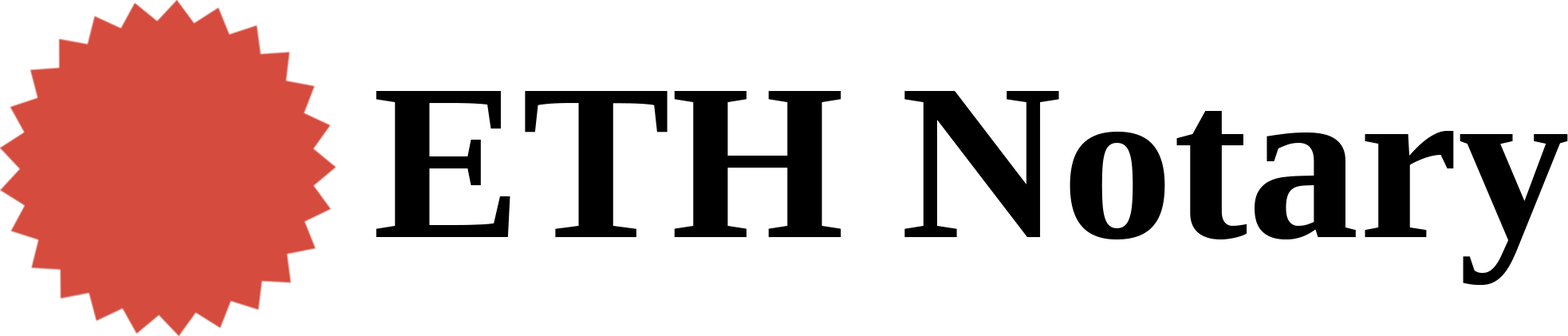
<style>
.page{position:relative;width:1568px;height:336px;background:#ffffff}
.page>*{position:absolute;margin:0}
.t1{font:223.3px "LiberationSerif-Bold";color:#000000}
</style>
<div class="page">
<p class="t1" style="left:376px;top:91px;width:1192px;height:194px">ETH Notary</p>
</div>
